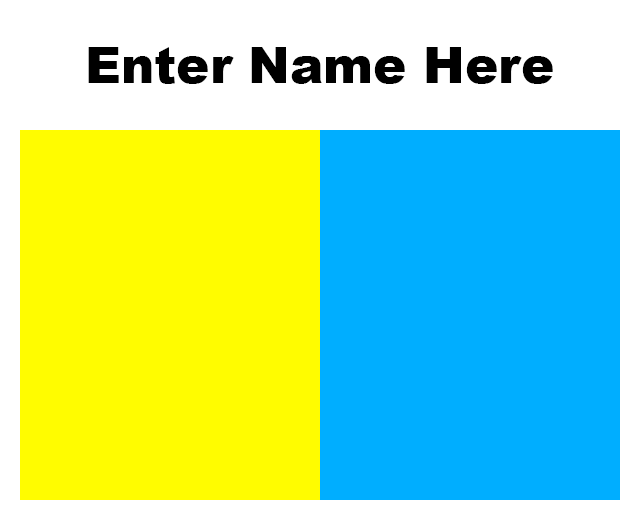
<style>
.page{position:relative;width:640px;height:520px;background:#fffc00}
.page>*{position:absolute;margin:0}
.t1{font:50px "Arial-Black";color:#000000}
</style>
<div class="page">
<p class="t1" style="left:88px;top:47px;width:465px;height:37px">Enter Name Here</p>
</div>
